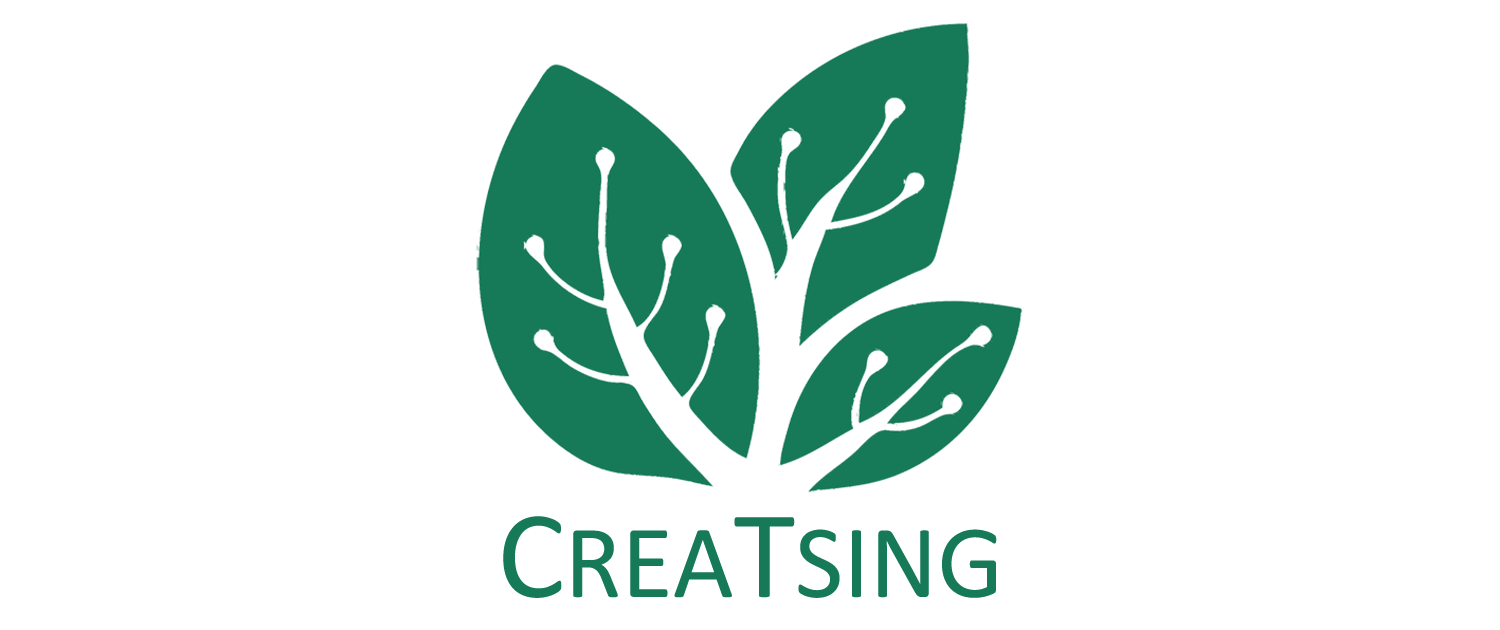
<style>
.page{position:relative;width:1500px;height:630px;background:#ffffff}
.page>*{position:absolute;margin:0}
.t1{font:104.8px "Calibri";color:#167a58}
.t2{font:125.8px "Calibri";color:#167a58}
</style>
<div class="page">
<p class="t1" style="left:503px;top:516px;width:494px;height:82px"><span class="t2">C</span>REA<span class="t2">T</span>SING</p>
</div>
